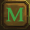
<style>
.page{position:relative;width:30px;height:30px}
.page>*{position:absolute;margin:0}
.t1{font:20px "TimesNewRomanPSMT";color:#409c43;font-weight:bold}
</style>
<div class="page">
<p class="t1" style="left:6px;top:7px;width:19px;height:15px">M</p>
</div>
